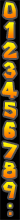
<style>
.page{position:relative;width:20px;height:220px;background:#000000}
.page>*{position:absolute;margin:0}
.t1{font:22.9px "PipeDream"}
</style>
<div class="page">
<p class="t1" style="left:3px;top:2px;width:13px;height:16px">0</p>
<p class="t1" style="left:5px;top:22px;width:9px;height:16px">1</p>
<p class="t1" style="left:3px;top:42px;width:14px;height:16px">2</p>
<p class="t1" style="left:3px;top:62px;width:13px;height:16px">3</p>
<p class="t1" style="left:2px;top:82px;width:15px;height:16px">4</p>
<p class="t1" style="left:4px;top:102px;width:12px;height:16px">5</p>
<p class="t1" style="left:4px;top:122px;width:11px;height:16px">6</p>
<p class="t1" style="left:3px;top:142px;width:15px;height:16px">7</p>
<p class="t1" style="left:3px;top:162px;width:13px;height:16px">8</p>
<p class="t1" style="left:3px;top:182px;width:13px;height:16px">9</p>
<p class="t1" style="left:8px;top:204px;width:4px;height:11px">:</p>
</div>
